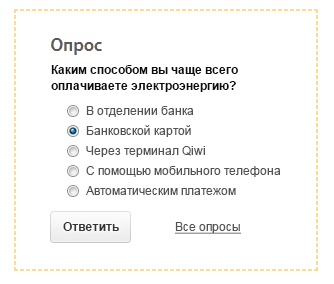
<style>
.page{position:relative;width:334px;height:284px;background:#ffffff}
.page>*{position:absolute;margin:0}
.t1{font:18px "ArialMT"}
.t2{font:18px "ArialMT";letter-spacing:0.05em}
.t3{font:18px "ArialMT";letter-spacing:0.025em}
.t4{font:12px/16px "Arial-BoldMT";color:#0d0d0d}
.t5{font:12px/20px "ArialMT";color:#525252}
.t6{font:12px "Arial-BoldMT";letter-spacing:0.025em;color:#353535}
.t7{font:12px "Arial-BoldMT";color:#353535}
.t8{font:12px "Arial-BoldMT";letter-spacing:0.01em;color:#353535}
.t9{font:12px "ArialMT";color:#535353;text-decoration:underline}
</style>
<div class="page">
<p class="t1" style="left:50px;top:38px;width:54px;height:17px"><span class="t2">О</span>пр<span class="t3">ос</span></p>
<p class="t4" style="left:51px;top:65px;width:187px;height:27px">Каким способом вы чаще всего оплачиваете электроэнергию?</p>
<p class="t5" style="left:86px;top:106px;width:195px;height:89px">В отделении банка<br>Банковской картой<br>Через терминал Qiwi<br>С помощью мобильного телефона<br>Автоматическим платежом</p>
<p class="t6" style="left:63px;top:222px;width:56px;height:9px">О<span class="t7">т</span><span class="t8">в</span><span class="t7">е</span>ти<span class="t7">ть</span></p>
<p class="t9" style="left:175px;top:222px;width:66px;height:12px">Все опросы</p>
</div>
